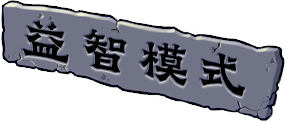
<style>
.page{position:relative;width:286px;height:122px;background:#ffffff}
.page>*{position:absolute;margin:0}
.t1{font:53px "GraveBustedStoneLishuSCRoughlyC";letter-spacing:0.14em;color:#000000;scale:1.08 1}
</style>
<div class="page">
<p class="t1" style="left:23px;top:20px;width:223px;height:76px;rotate:11deg">益智模式</p>
</div>
